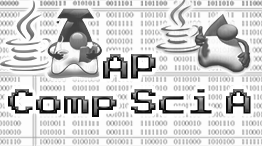
<style>
.page{position:relative;width:262px;height:146px;background:#fdfdfd}
.page>*{position:absolute;margin:0}
.t1{font:28px "PressStart2P-Regular"}
</style>
<div class="page">
<p class="t1" style="left:103px;top:54px;width:53px;height:25px">AP</p>
<p class="t1" style="left:8px;top:89px;width:243px;height:28px">Comp Sci A</p>
</div>
